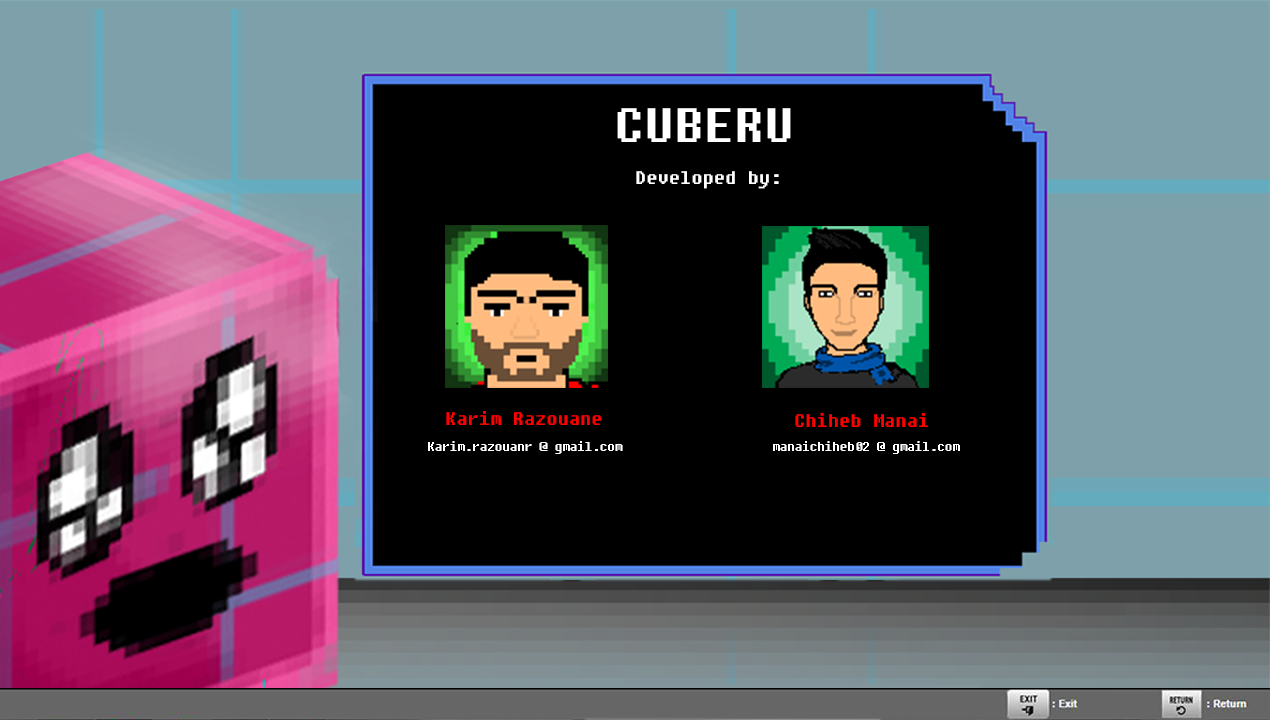
<style>
.page{position:relative;width:1270px;height:720px;background:#000000}
.page>*{position:absolute;margin:0}
.t1{font:48px "Fixedsys";color:#ffffff}
.t2{font:18px "Fixedsys";color:#ffffff}
.t3{font:18px "Fixedsys";color:#ff0000}
.t4{font:12px "Fixedsys";color:#ffffff}
</style>
<div class="page">
<p class="t1" style="left:617px;top:108px;width:174px;height:34px">CUBERU</p>
<p class="t2" style="left:636px;top:171px;width:143px;height:18px">Developed by:</p>
<p class="t3" style="left:446px;top:411px;width:156px;height:14px">Karim Razouane</p>
<p class="t3" style="left:795px;top:413px;width:133px;height:14px">Chiheb Manai</p>
<p class="t4" style="left:428px;top:441px;width:532px;height:13px">Karim.razouanr @ gmail.com                    manaichiheb02 @ gmail.com</p>
</div>
